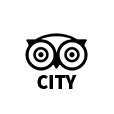
<style>
.page{position:relative;width:114px;height:114px;background:#ffffff}
.page>*{position:absolute;margin:0}
.t1{font:20px "SourceSansPro-Black";color:#000000}
</style>
<div class="page">
<p class="t1" style="left:37px;top:75px;width:40px;height:14px">CITY</p>
</div>
